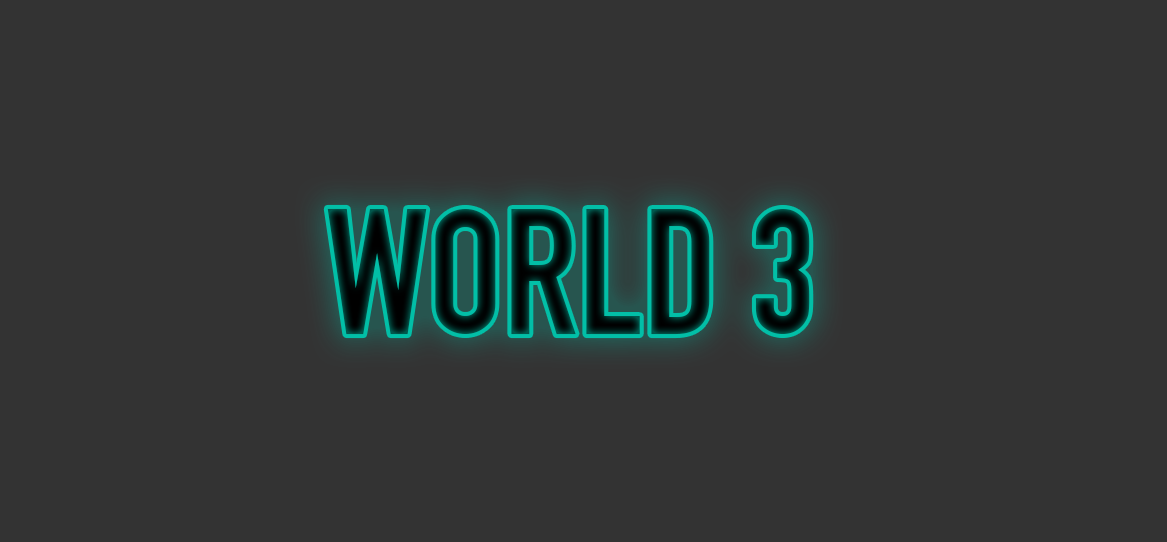
<style>
.page{position:relative;width:1167px;height:542px;background:#333333}
.page>*{position:absolute;margin:0}
.t1{font:175.4px "DINEngschrift"}
</style>
<div class="page">
<p class="t1" style="left:327px;top:208px;width:483px;height:127px">WORLD 3</p>
</div>
